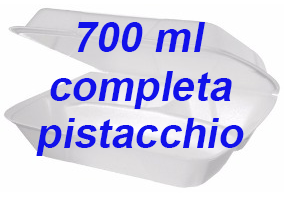
<style>
.page{position:relative;width:284px;height:204px;background:#fefefe}
.page>*{position:absolute;margin:0}
.t1{font:72px "Arial-BoldMT";color:#1111ea;font-style:italic}
</style>
<div class="page">
<p class="t1" style="left:77px;top:22px;width:128px;height:30px">700 ml</p>
<p class="t1" style="left:50px;top:71px;width:182px;height:38px">completa</p>
<p class="t1" style="left:36px;top:118px;width:208px;height:38px">pistacchio</p>
</div>
